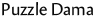
<style>
.page{position:relative;width:96px;height:18px;background:#ffffff}
.page>*{position:absolute;margin:0}
.t1{font:17.3px "Amira-Roman";color:#000000}
</style>
<div class="page">
<p class="t1" style="left:2px;top:2px;width:91px;height:14px;opacity:0.96">Puzzle Dama</p>
</div>
